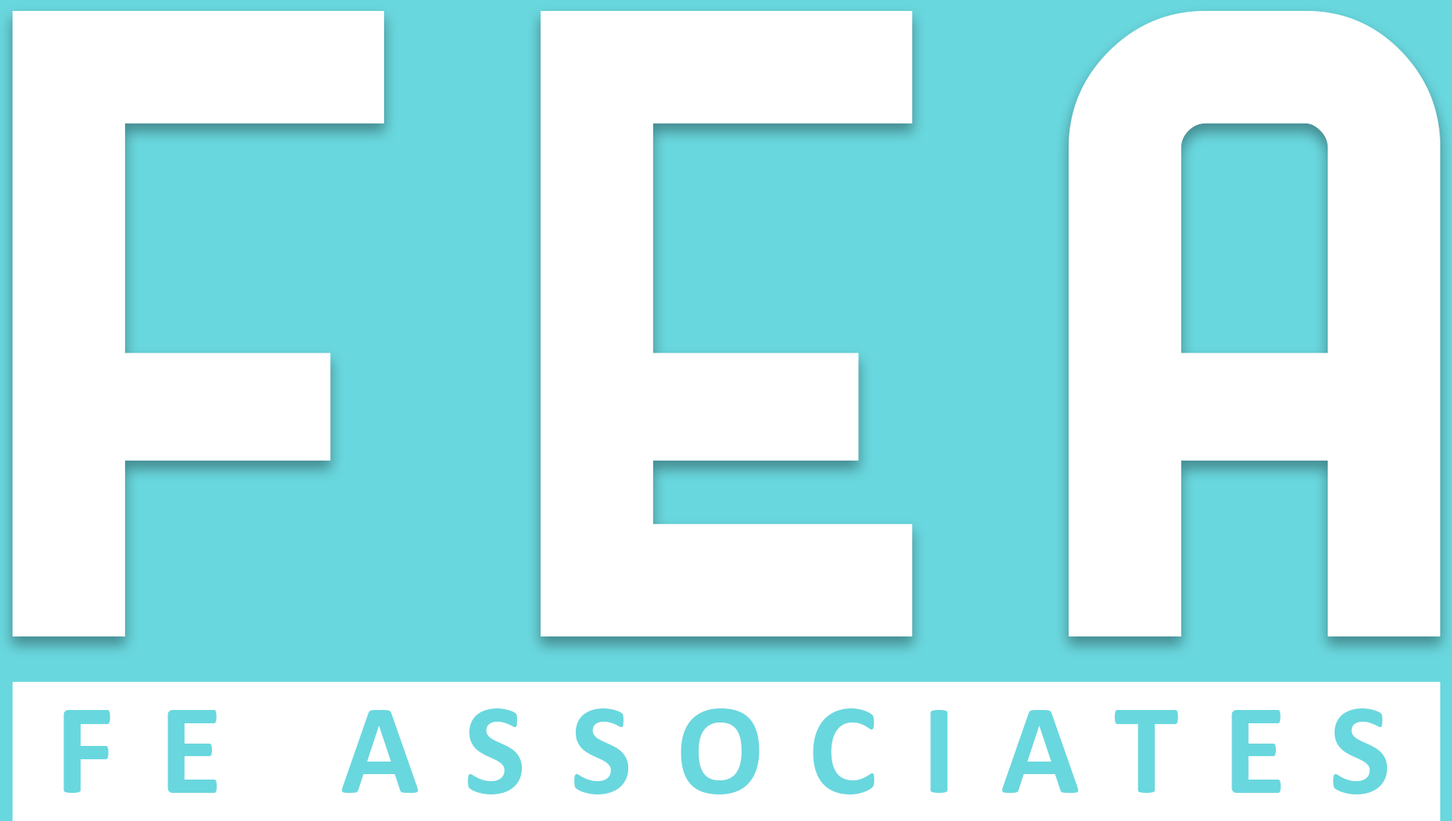
<style>
.page{position:relative;width:1452px;height:821px;background:#ffffff}
.page>*{position:absolute;margin:0}
.t1{font:782.2px "StadiumRegular";color:#ffffff}
.t2{font:130.4px "Calibri-Bold";letter-spacing:0.34em;color:#69d7de}
</style>
<div class="page">
<p class="t1" style="left:13px;top:11px;width:1427px;height:626px">FEA</p>
<p class="t2" style="left:63px;top:709px;width:1325px;height:86px">FE ASSOCIATES</p>
</div>
